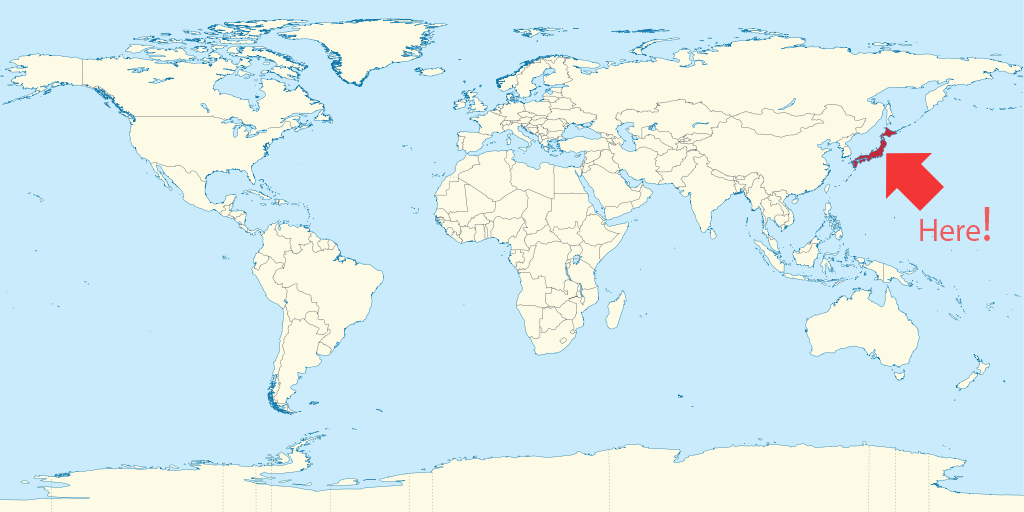
<style>
.page{position:relative;width:1024px;height:512px;background:#c9ebfc}
.page>*{position:absolute;margin:0}
.t1{font:32px "MyriadPro-Regular";color:#f05c5e}
.t2{font:50px "MyriadPro-Regular";color:#f05c5e}
</style>
<div class="page">
<p class="t1" style="left:920px;top:207px;width:70px;height:34px">Here<span class="t2">!</span></p>
</div>
